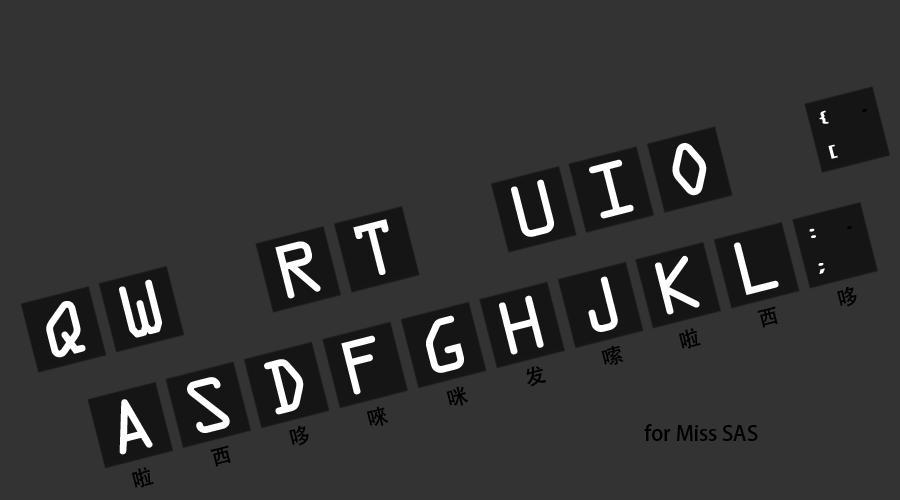
<style>
.page{position:relative;width:900px;height:500px;background:#333333}
.page>*{position:absolute;margin:0}
.t1{font:13.9px/35.4px "AdobeHeitiStd-Regular";color:#ffffff;font-weight:bold;scale:1.9 1}
.t2{font:13.9px/35.4px "AdobeHeitiStd-Regular";color:#000000;font-weight:bold;scale:1.9 1}
.t3{font:68.5px "OCRAStd";color:#ffffff}
.t4{font:20.8px "AdobeHeitiStd-Regular";color:#000000}
</style>
<div class="page">
<p class="t1" style="left:819px;top:109px;width:48px;height:50px;rotate:-14deg">{     <span class="t2">.<br></span>[</p>
<p class="t3" style="left:672px;top:143px;width:35px;height:53px;rotate:-14deg">O</p>
<p class="t3" style="left:589px;top:159px;width:45px;height:60px;rotate:-14deg">I</p>
<p class="t3" style="left:511px;top:179px;width:43px;height:58px;rotate:-14deg">U</p>
<p class="t3" style="left:353px;top:219px;width:36px;height:56px;rotate:-14deg">T</p>
<p class="t1" style="left:809px;top:226px;width:43px;height:48px;rotate:-14deg">：  <span class="t2">.<br></span>；</p>
<p class="t3" style="left:275px;top:241px;width:46px;height:58px;rotate:-14deg">R</p>
<p class="t3" style="left:734px;top:242px;width:45px;height:53px;rotate:-14deg">L</p>
<p class="t3" style="left:655px;top:255px;width:45px;height:60px;rotate:-14deg">K</p>
<p class="t3" style="left:119px;top:279px;width:43px;height:59px;rotate:-14deg">W</p>
<p class="t3" style="left:588px;top:276px;width:30px;height:56px;rotate:-14deg">J</p>
<p class="t4" style="left:837px;top:287px;width:20px;height:20px;rotate:-14deg">哆</p>
<p class="t3" style="left:46px;top:301px;width:40px;height:57px;rotate:-14deg">Q</p>
<p class="t3" style="left:499px;top:295px;width:45px;height:60px;rotate:-14deg">H</p>
<p class="t3" style="left:426px;top:315px;width:38px;height:58px;rotate:-14deg">G</p>
<p class="t4" style="left:757px;top:306px;width:21px;height:22px;rotate:-14deg">西</p>
<p class="t4" style="left:679px;top:328px;width:22px;height:21px;rotate:-14deg">啦</p>
<p class="t3" style="left:341px;top:335px;width:35px;height:60px;rotate:-14deg">F</p>
<p class="t4" style="left:601px;top:345px;width:23px;height:20px;rotate:-14deg">嗦</p>
<p class="t3" style="left:264px;top:359px;width:40px;height:56px;rotate:-14deg">D</p>
<p class="t4" style="left:526px;top:366px;width:20px;height:21px;rotate:-14deg">发</p>
<p class="t3" style="left:187px;top:377px;width:43px;height:56px;rotate:-14deg">S</p>
<p class="t4" style="left:446px;top:386px;width:22px;height:20px;rotate:-14deg">咪</p>
<p class="t3" style="left:119px;top:399px;width:34px;height:56px;rotate:-14deg">A</p>
<p class="t4" style="left:366px;top:406px;width:23px;height:20px;rotate:-14deg">唻</p>
<p class="t4" style="left:644px;top:424px;width:114px;height:17px">for Miss SAS</p>
<p class="t4" style="left:289px;top:426px;width:20px;height:20px;rotate:-14deg">哆</p>
<p class="t4" style="left:210px;top:445px;width:21px;height:22px;rotate:-14deg">西</p>
<p class="t4" style="left:132px;top:467px;width:22px;height:21px;rotate:-14deg">啦</p>
</div>
